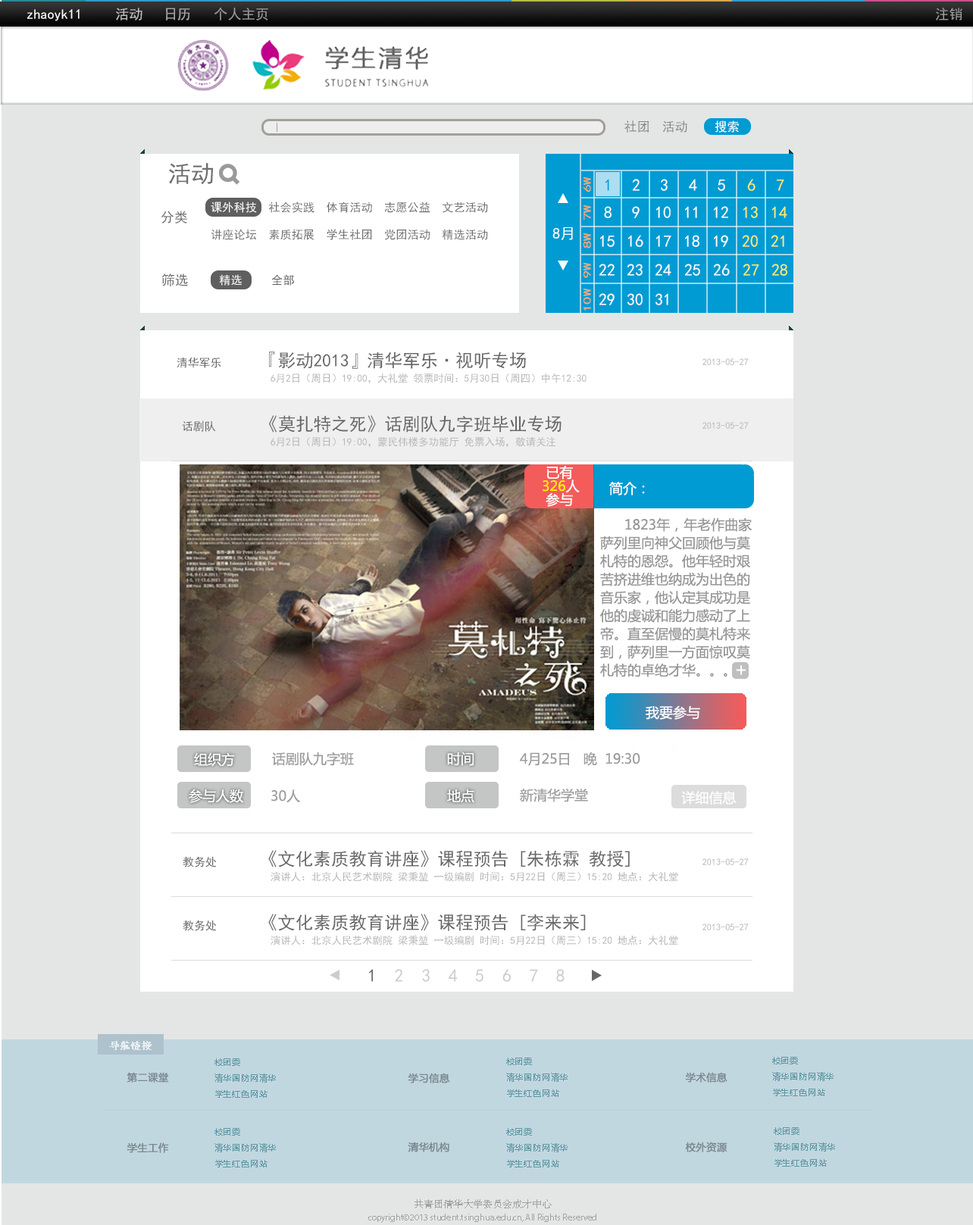
<style>
.page{position:relative;width:973px;height:1225px;background:#e4e6e5}
.page>*{position:absolute;margin:0}
.t1{font:13.8px "SimHei";color:#fffefe}
.t2{font:13.8px "SimHei";color:#c3c3c3}
.t3{font:13.8px "SimHei";color:#a9a9a9}
.t4{font:13.8px "SimHei";color:#9b9b9b}
.t5{font:12.7px "SimHei";color:#858585}
.t6{font:12.5px "SimHei";color:#ffffff}
.t7{font:23.4px "SimHei";color:#6e6e6e}
.t8{font:10.6px "SimHei";color:#ffaa6c;scale:1.5 1}
.t9{font:16.7px "SimHei";color:#009bd3}
.t10{font:16.7px "SimHei";color:#fefefe}
.t11{font:16.7px "SimHei";color:#ffec6c}
.t12{font:11.6px/27.3px "SimHei";color:#6e6e6e}
.t13{font:11.6px/27.3px "SimHei";color:#fefefe}
.t14{font:13.6px "SimHei";color:#6e6e6e}
.t15{font:15.2px "SimHei";color:#ffffff}
.t16{font:17.8px "SimHei";color:#676767}
.t17{font:11.3px "SimHei";color:#676767}
.t18{font:9.2px "SimHei";color:#b6b6b6}
.t19{font:10.2px "SimHei";color:#b6b6b6}
.t20{font:13.6px/13.6px "MicrosoftYaHei";color:#ffffff}
.t21{font:13.6px/13.6px "MicrosoftYaHei";color:#fff002}
.t22{font:13.6px "MicrosoftYaHei";color:#ffffff}
.t23{font:13.6px/18.2px "MicrosoftYaHei";color:#979595}
.t24{font:18.2px "MicrosoftYaHei";color:#ffffff}
.t25{font:13.6px "MicrosoftYaHei";color:#9d9d9d}
.t26{font:18px "SimHei";color:#cdcdcd}
.t27{font:18px "SimHei";color:#676767}
.t28{font:10.1px "STSong";color:#ffffff;font-weight:bold}
.t29{font:8.1px/16.2px "MicrosoftYaHei";letter-spacing:0.075em;color:#5f97a3}
.t30{font:10.1px "MicrosoftYaHei";color:#7a888e;font-weight:bold}
.t31{font:9.1px/14.1px "MyriadPro-Regular";color:#a2a3a2}
.t32{font:10.1px/14.1px "STSong";color:#a2a3a2}
</style>
<div class="page">
<p class="t1" style="left:27px;top:9px;width:53px;height:12px">zhaoyk11</p>
<p class="t2" style="left:116px;top:8px;width:26px;height:12px">活动</p>
<p class="t3" style="left:166px;top:8px;width:24px;height:12px">日历</p>
<p class="t4" style="left:214px;top:8px;width:54px;height:12px">个人主页</p>
<p class="t4" style="left:936px;top:8px;width:26px;height:12px">注销</p>
<p class="t5" style="left:624px;top:120px;width:25px;height:13px">社团</p>
<p class="t5" style="left:662px;top:120px;width:25px;height:13px">活动</p>
<p class="t6" style="left:715px;top:120px;width:24px;height:13px">搜索</p>
<p class="t7" style="left:169px;top:163px;width:45px;height:22px">活动</p>
<p class="t8" style="left:584px;top:177px;width:7px;height:15px;rotate:-90deg">6W</p>
<p class="t9" style="left:606px;top:179px;width:3px;height:12px">1</p>
<p class="t10" style="left:632px;top:179px;width:8px;height:12px">2</p>
<p class="t10" style="left:661px;top:179px;width:7px;height:12px">3</p>
<p class="t10" style="left:689px;top:179px;width:8px;height:12px">4</p>
<p class="t10" style="left:718px;top:180px;width:7px;height:11px">5</p>
<p class="t11" style="left:747px;top:179px;width:9px;height:12px">6</p>
<p class="t11" style="left:777px;top:180px;width:7px;height:11px">7</p>
<p class="t12" style="left:211px;top:202px;width:277px;height:38px"><span class="t13">课外科技 </span> 社会实践  体育活动  志愿公益  文艺活动<br>讲座论坛  素质拓展  学生社团  党团活动  精选活动</p>
<p class="t8" style="left:584px;top:205px;width:7px;height:15px;rotate:-90deg">7W</p>
<p class="t10" style="left:604px;top:206px;width:8px;height:12px">8</p>
<p class="t10" style="left:632px;top:206px;width:8px;height:12px">9</p>
<p class="t10" style="left:656px;top:206px;width:15px;height:12px">10</p>
<p class="t10" style="left:685px;top:206px;width:12px;height:12px">11</p>
<p class="t10" style="left:714px;top:206px;width:14px;height:12px">12</p>
<p class="t11" style="left:743px;top:206px;width:15px;height:12px">13</p>
<p class="t11" style="left:772px;top:206px;width:15px;height:12px">14</p>
<p class="t14" style="left:161px;top:211px;width:26px;height:13px">分类</p>
<p class="t15" style="left:552px;top:227px;width:21px;height:13px">8月</p>
<p class="t8" style="left:584px;top:233px;width:7px;height:16px;rotate:-90deg">8W</p>
<p class="t10" style="left:600px;top:235px;width:15px;height:12px">15</p>
<p class="t10" style="left:628px;top:235px;width:15px;height:12px">16</p>
<p class="t10" style="left:656px;top:235px;width:15px;height:12px">17</p>
<p class="t10" style="left:685px;top:235px;width:14px;height:12px">18</p>
<p class="t10" style="left:714px;top:235px;width:14px;height:12px">19</p>
<p class="t11" style="left:742px;top:235px;width:16px;height:12px">20</p>
<p class="t11" style="left:771px;top:235px;width:13px;height:12px">21</p>
<p class="t8" style="left:584px;top:263px;width:7px;height:15px;rotate:-90deg">9W</p>
<p class="t10" style="left:599px;top:264px;width:16px;height:12px">22</p>
<p class="t10" style="left:627px;top:264px;width:16px;height:12px">23</p>
<p class="t10" style="left:655px;top:264px;width:16px;height:12px">24</p>
<p class="t10" style="left:684px;top:264px;width:16px;height:12px">25</p>
<p class="t10" style="left:713px;top:264px;width:17px;height:12px">26</p>
<p class="t11" style="left:743px;top:264px;width:16px;height:12px">27</p>
<p class="t11" style="left:771px;top:264px;width:16px;height:12px">28</p>
<p class="t14" style="left:161px;top:274px;width:27px;height:12px">筛选</p>
<p class="t8" style="left:584px;top:289px;width:7px;height:22px;rotate:-90deg">10W</p>
<p class="t10" style="left:599px;top:293px;width:16px;height:12px">29</p>
<p class="t10" style="left:627px;top:293px;width:16px;height:12px">30</p>
<p class="t10" style="left:656px;top:293px;width:12px;height:12px">31</p>
<p class="t16" style="left:269px;top:352px;width:257px;height:17px">『影动2013』清华军乐·视听专场</p>
<p class="t17" style="left:177px;top:357px;width:44px;height:11px">清华军乐</p>
<p class="t18" style="left:703px;top:358px;width:46px;height:7px">2013-05-27</p>
<p class="t19" style="left:271px;top:373px;width:316px;height:10px">6月2日（周日）19:00，大礼堂 领票时间：5月30日（周四）中午12:30</p>
<p class="t17" style="left:182px;top:421px;width:33px;height:11px">话剧队</p>
<p class="t16" style="left:269px;top:415px;width:293px;height:18px">《莫扎特之死》话剧队九字班毕业专场</p>
<p class="t18" style="left:703px;top:422px;width:46px;height:7px">2013-05-27</p>
<p class="t19" style="left:271px;top:437px;width:284px;height:10px">6月2日（周日）19:00，蒙民伟楼多功能厅 免票入场，敬请关注</p>
<p class="t20" style="left:543px;top:465px;width:37px;height:42px">已有<br><span class="t21">326</span>人<br> 参与</p>
<p class="t22" style="left:609px;top:482px;width:36px;height:14px">简介：</p>
<p class="t23" style="left:600px;top:518px;width:152px;height:160px">1823年，年老作曲家<br>萨列里向神父回顾他与莫<br>札特的恩怨。他年轻时艰<br>苦挤进维也纳成为出色的<br>音乐家，他认定其成功是<br>他的虔诚和能力感动了上<br>帝。直至倨慢的莫札特来<br>到，萨列里一方面惊叹莫<br>札特的卓绝才华。。。</p>
<p class="t24" style="left:736px;top:665px;width:10px;height:10px">+</p>
<p class="t22" style="left:646px;top:706px;width:54px;height:14px">我要参与</p>
<p class="t25" style="left:272px;top:752px;width:82px;height:14px">话剧队九字班</p>
<p class="t25" style="left:520px;top:753px;width:120px;height:13px">4月25日   晚  19:30</p>
<p class="t25" style="left:271px;top:790px;width:29px;height:13px">30人</p>
<p class="t25" style="left:520px;top:788px;width:68px;height:15px">新清华学堂</p>
<p class="t17" style="left:183px;top:856px;width:33px;height:12px">教务处</p>
<p class="t16" style="left:268px;top:850px;width:362px;height:18px">《文化素质教育讲座》课程预告 [朱栋霖 教授]</p>
<p class="t18" style="left:703px;top:859px;width:46px;height:6px">2013-05-27</p>
<p class="t19" style="left:271px;top:872px;width:407px;height:10px">演讲人：北京人民艺术剧院 梁秉堃 一级编剧 时间：5月22日（周三）15:20 地点：大礼堂</p>
<p class="t16" style="left:268px;top:914px;width:318px;height:17px">《文化素质教育讲座》课程预告 [李来来]</p>
<p class="t17" style="left:183px;top:920px;width:33px;height:11px">教务处</p>
<p class="t18" style="left:703px;top:924px;width:46px;height:7px">2013-05-27</p>
<p class="t19" style="left:271px;top:935px;width:407px;height:11px">演讲人：北京人民艺术剧院 梁秉堃 一级编剧 时间：5月22日（周三）15:20 地点：大礼堂</p>
<p class="t26" style="left:369px;top:969px;width:196px;height:13px"><span class="t27">1  </span>2  3  4  5  6  7  8</p>
<p class="t28" style="left:109px;top:1041px;width:43px;height:9px;opacity:0.7">导航链接</p>
<p class="t29" style="left:214px;top:1059px;width:62px;height:39px">校团委<br>清华国防网清华<br>学生红色网站</p>
<p class="t29" style="left:506px;top:1058px;width:62px;height:39px">校团委<br>清华国防网清华<br>学生红色网站</p>
<p class="t29" style="left:772px;top:1057px;width:62px;height:40px">校团委<br>清华国防网清华<br>学生红色网站</p>
<p class="t30" style="left:127px;top:1072px;width:42px;height:11px">第二课堂</p>
<p class="t30" style="left:408px;top:1073px;width:42px;height:11px">学习信息</p>
<p class="t30" style="left:685px;top:1072px;width:43px;height:11px">学术信息</p>
<p class="t29" style="left:214px;top:1128px;width:62px;height:40px">校团委<br>清华国防网清华<br>学生红色网站</p>
<p class="t29" style="left:506px;top:1128px;width:62px;height:40px">校团委<br>清华国防网清华<br>学生红色网站</p>
<p class="t29" style="left:774px;top:1128px;width:61px;height:39px">校团委<br>清华国防网清华<br>学生红色网站</p>
<p class="t30" style="left:127px;top:1143px;width:42px;height:10px">学生工作</p>
<p class="t30" style="left:408px;top:1142px;width:41px;height:11px">清华机构</p>
<p class="t30" style="left:685px;top:1142px;width:43px;height:11px">校外资源</p>
<p class="t31" style="left:368px;top:1200px;width:228px;height:23px;text-align:center"><span class="t32">共青团清华大学委员会成才中心<br></span>copyright©2013 student.tsinghua.edu.cn, All Rights Reserved</p>
</div>
